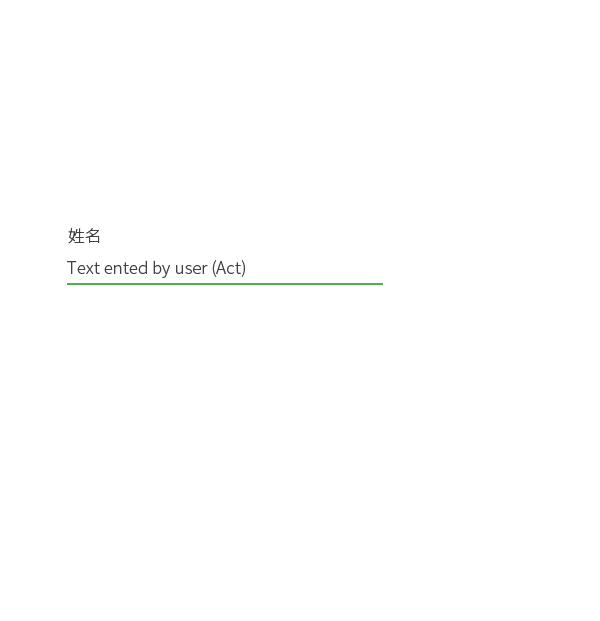
<style>
.page{position:relative;width:600px;height:621px;background:#ffffff}
.page>*{position:absolute;margin:0}
.t1{font:16.7px "NotoSansCJKsc-Light";color:#414141}
</style>
<div class="page">
<p class="t1" style="left:68px;top:227px;width:32px;height:17px">姓名</p>
<p class="t1" style="left:67px;top:260px;width:178px;height:18px">Text ented by user (Act)</p>
</div>
